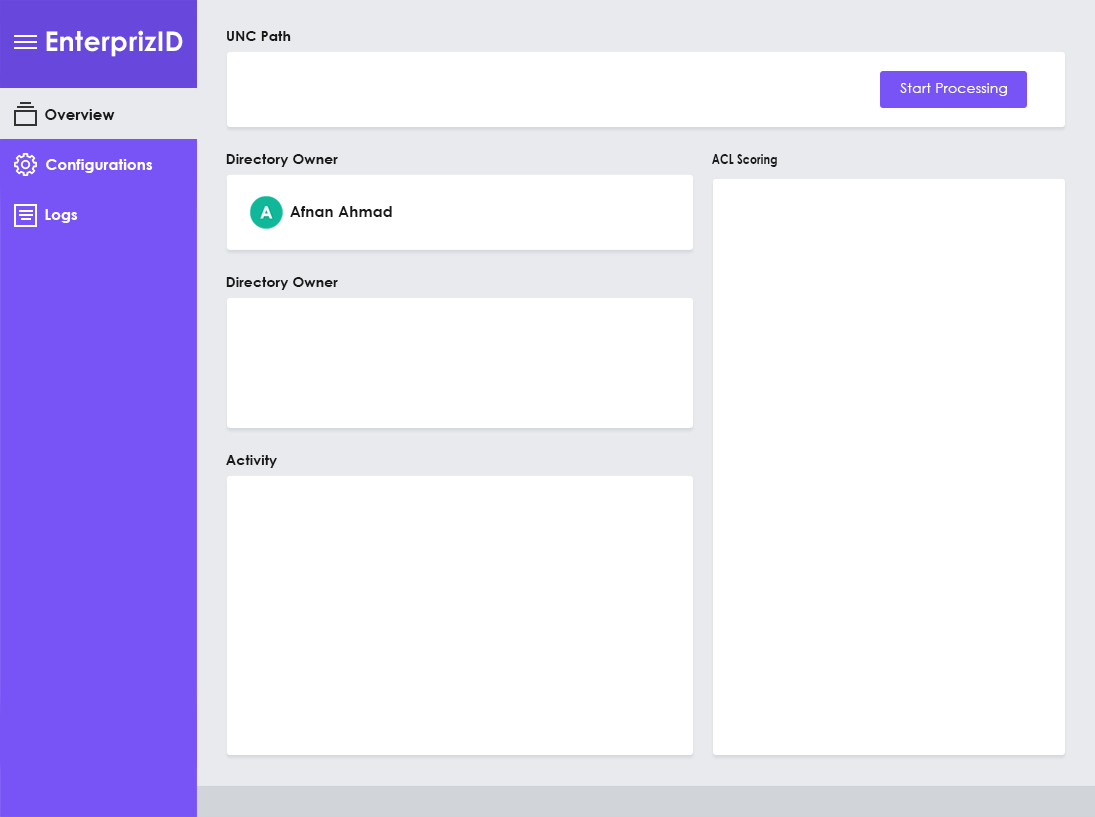
<style>
.page{position:relative;width:1095px;height:817px;background:#ffffff}
.page>*{position:absolute;margin:0}
.t1{font:27.1px "CenturyGothic-Bold";letter-spacing:0.01em;color:#ffffff}
.t2{font:14px "CenturyGothic-Bold";letter-spacing:0.01em;color:#191919}
.t3{font:14px "CenturyGothic";letter-spacing:0.01em;color:#ffffff}
.t4{font:15px "CenturyGothic-Bold";letter-spacing:0.01em;color:#191919}
.t5{font:15px "CenturyGothic-Bold";letter-spacing:0.01em;color:#ffffff}
.t6{font:14px "CenturyGothic-Bold";letter-spacing:0.01em;color:#191919;scale:0.79 1}
</style>
<div class="page">
<p class="t1" style="left:46px;top:30px;width:137px;height:27px">EnterprizID</p>
<p class="t2" style="left:227px;top:31px;width:64px;height:10px">UNC Path</p>
<p class="t3" style="left:900px;top:83px;width:107px;height:13px">Start Processing</p>
<p class="t4" style="left:45px;top:109px;width:70px;height:11px">Overview</p>
<p class="t5" style="left:46px;top:159px;width:107px;height:14px">Configurations</p>
<p class="t2" style="left:226px;top:154px;width:112px;height:13px">Directory Owner</p>
<p class="t6" style="left:712px;top:154px;width:65px;height:13px">ACL Scoring</p>
<p class="t5" style="left:45px;top:209px;width:33px;height:14px">Logs</p>
<p class="t4" style="left:290px;top:206px;width:102px;height:11px">Afnan Ahmad</p>
<p class="t2" style="left:226px;top:277px;width:112px;height:13px">Directory Owner</p>
<p class="t2" style="left:226px;top:455px;width:51px;height:13px">Activity</p>
</div>
